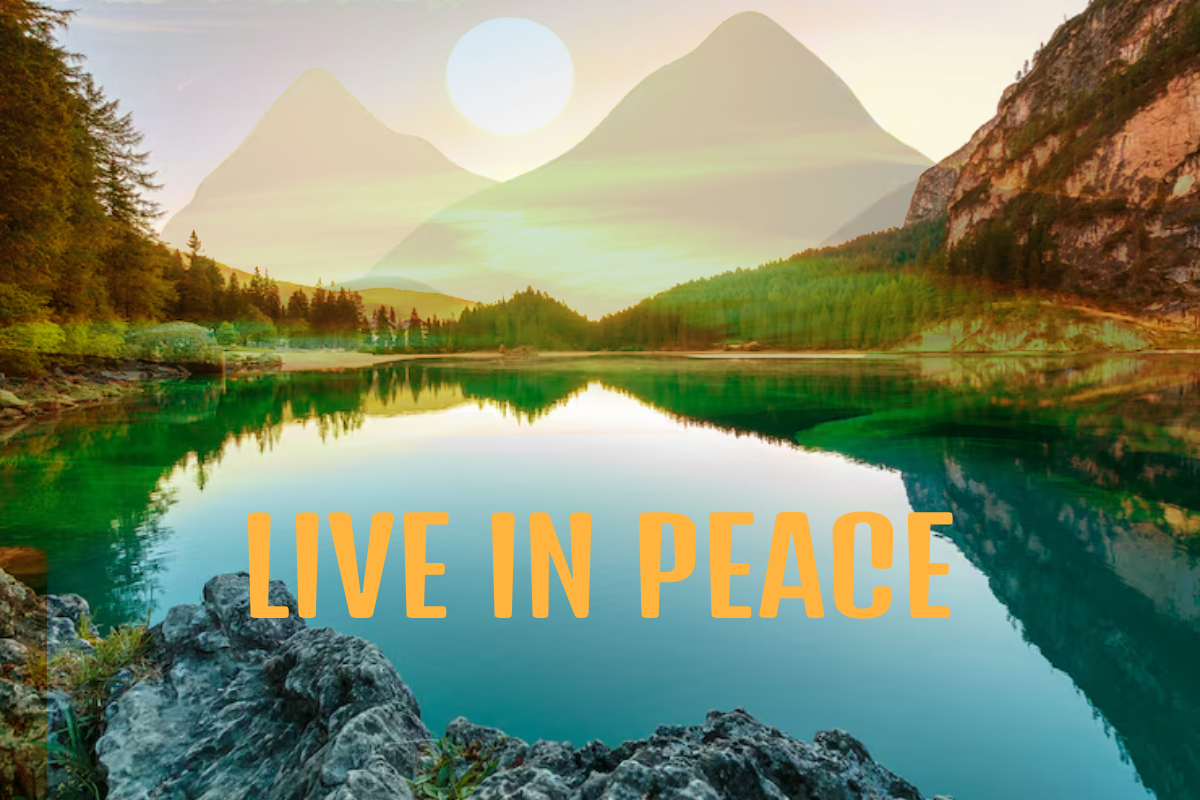
<style>
.page{position:relative;width:1200px;height:800px}
.page>*{position:absolute;margin:0}
.t1{font:128.2px "DenkOne-Regular";color:#ffb43f}
</style>
<div class="page">
<p class="t1" style="left:247px;top:511px;width:706px;height:108px">LIVE IN PEACE</p>
</div>
